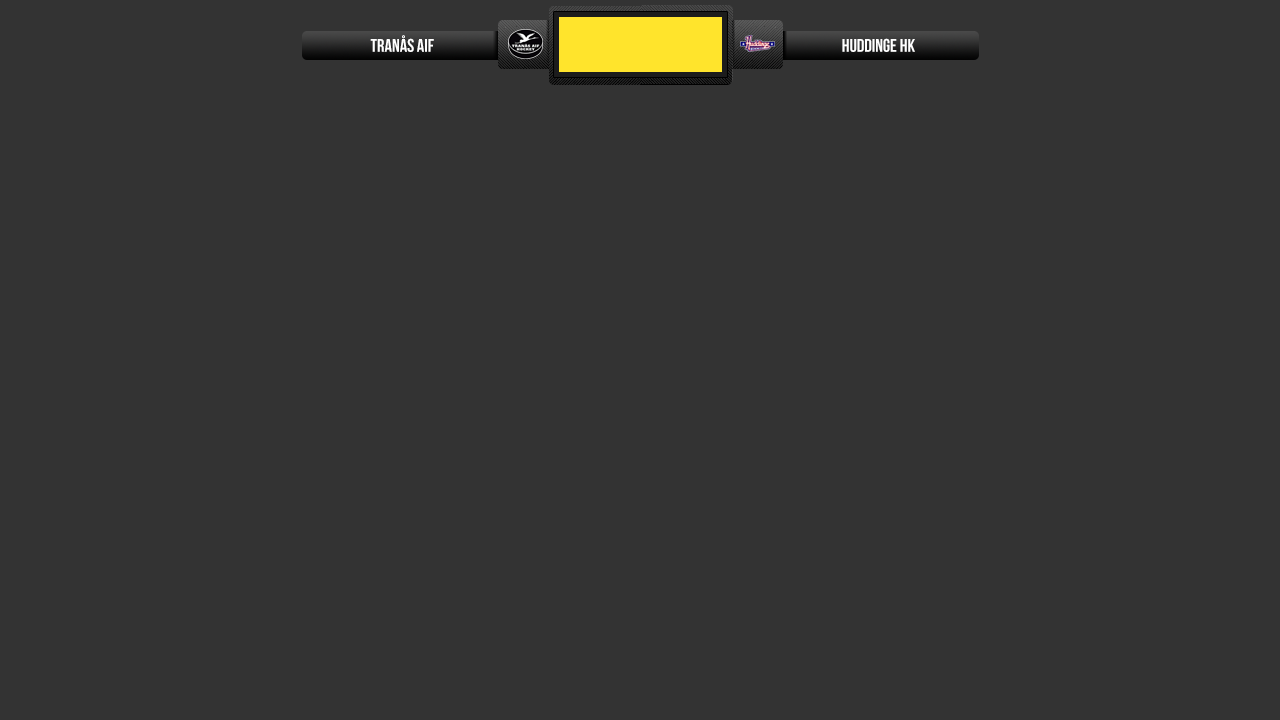
<style>
.page{position:relative;width:1280px;height:720px;background:#333333}
.page>*{position:absolute;margin:0}
.t1{font:18.3px "BebasNeue";color:#ffffff}
</style>
<div class="page">
<p class="t1" style="left:370px;top:35px;width:64px;height:17px">tranås aif</p>
<p class="t1" style="left:842px;top:38px;width:73px;height:14px">huddinge hk</p>
</div>
